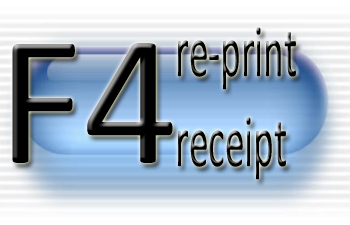
<style>
.page{position:relative;width:350px;height:225px}
.page>*{position:absolute;margin:0}
.t1{font:75px "Calibri";color:#000000;scale:0.52 1}
.t2{font:187.1px "Calibri";color:#000000}
</style>
<div class="page">
<p class="t1" style="left:178px;top:27px;width:118px;height:153px">re-print<br>receipt</p>
<p class="t2" style="left:12px;top:43px;width:161px;height:120px">F4</p>
</div>
